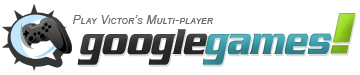
<style>
.page{position:relative;width:360px;height:75px;background:#ffffff}
.page>*{position:absolute;margin:0}
.t1{font:12px "Arial-ItalicMT";letter-spacing:0.01em;color:#6b6b6b;font-variant:small-caps}
.t2{font:60px "AirMillhouseItalic";letter-spacing:-0.01em;color:#2f2f2f}
.t3{font:60px "AirMillhouseItalic";letter-spacing:-0.01em;color:#3fa5b1}
.t4{font:60px "AirMillhouseItalic";letter-spacing:-0.01em;color:#9ddc23}
</style>
<div class="page">
<p class="t1" style="left:73px;top:15px;width:140px;height:9px">Play Victor’s Multi-player</p>
<p class="t2" style="left:77px;top:13px;width:279px;height:52px">google<span class="t3">games</span><span class="t4">!</span></p>
</div>
